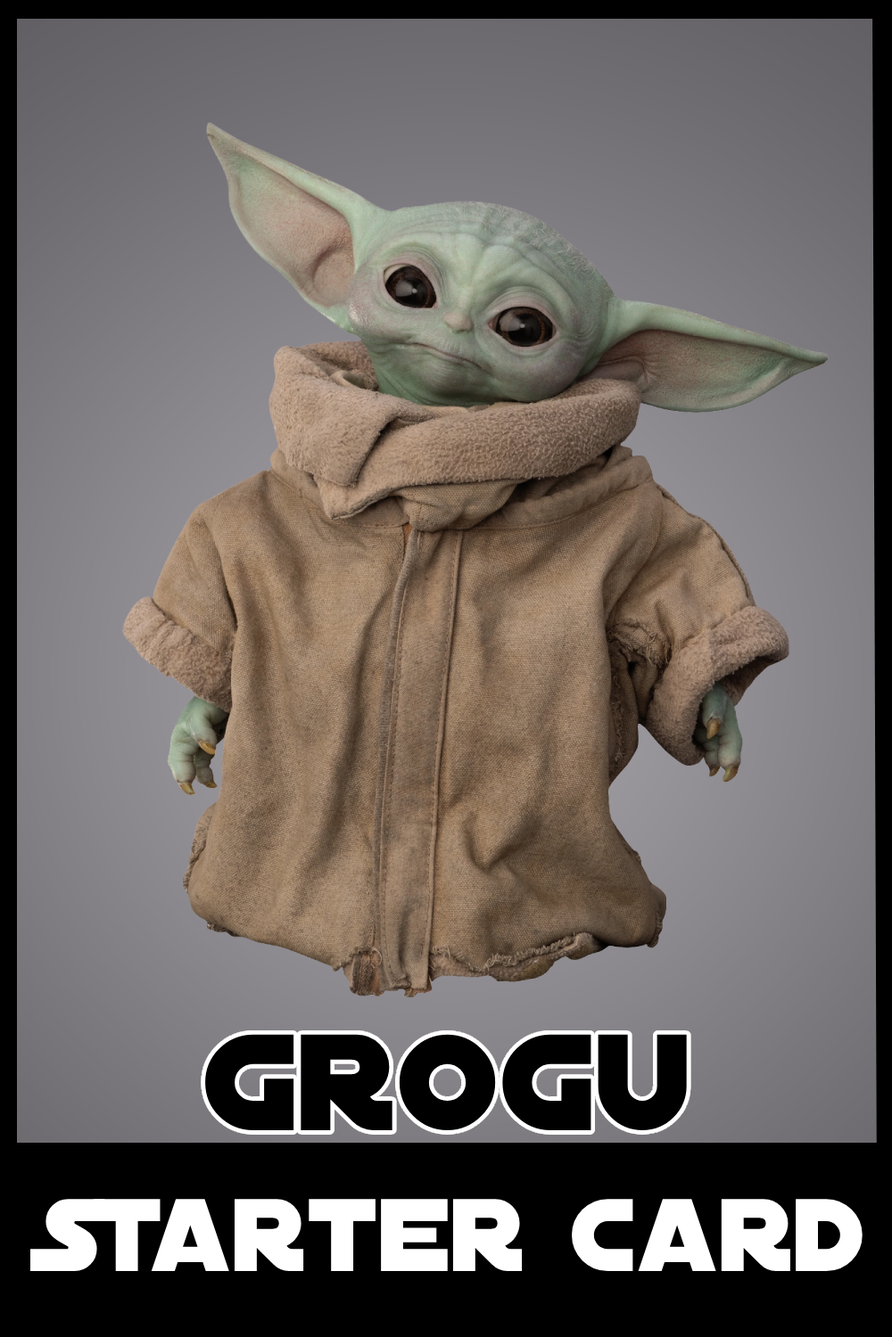
<style>
.page{position:relative;width:892px;height:1337px}
.page>*{position:absolute;margin:0}
.t1{font:147.1px "DistantGalaxy";color:#000000}
.t2{font:110.9px "DistantGalaxy";color:#ffffff}
</style>
<div class="page">
<p class="t1" style="left:205px;top:1034px;width:482px;height:97px">Grogu</p>
<p class="t2" style="left:29px;top:1199px;width:833px;height:72px">Starter Card</p>
</div>
